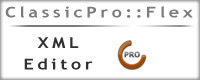
<style>
.page{position:relative;width:200px;height:80px;background:#ffffff}
.page>*{position:absolute;margin:0}
.t1{font:14.9px "TrebuchetMS-Bold";letter-spacing:0.2em;color:#7b7b7b;scale:1.2 1}
.t2{font:14.9px "TrebuchetMS-Bold";letter-spacing:0.2em;color:#303030;scale:1.2 1}
</style>
<div class="page">
<p class="t1" style="left:5px;top:6px;width:188px;height:12px">ClassicPro::Flex</p>
<p class="t2" style="left:24px;top:37px;width:69px;height:33px;text-align:center">XML<br>Editor</p>
</div>
